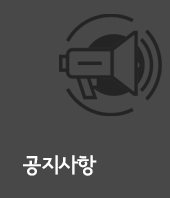
<style>
.page{position:relative;width:170px;height:198px;background:#484848}
.page>*{position:absolute;margin:0}
.t1{font:21.2px "SeoulNamsanEB";letter-spacing:-0.025em;color:#ffffff;text-transform:uppercase}
</style>
<div class="page">
<p class="t1" style="left:23px;top:155px;width:74px;height:21px">공지사항</p>
<p class="t1" style="left:23px;top:155px;width:74px;height:21px">공지사항</p>
</div>
